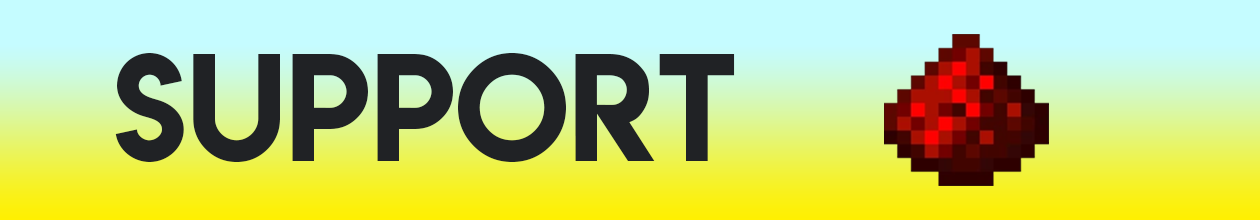
<style>
.page{position:relative;width:1260px;height:220px;background:#c5fcff}
.page>*{position:absolute;margin:0}
.t1{font:136px "LemonMilk";color:#202225}
</style>
<div class="page">
<p class="t1" style="left:115px;top:52px;width:620px;height:110px">Support</p>
</div>
